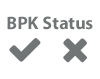
<style>
.page{position:relative;width:100px;height:79px;background:#ffffff}
.page>*{position:absolute;margin:0}
.t1{font:18px "MyriadPro-Bold";color:#717576}
</style>
<div class="page">
<p class="t1" style="left:7px;top:16px;width:86px;height:14px">BPK Status</p>
</div>
